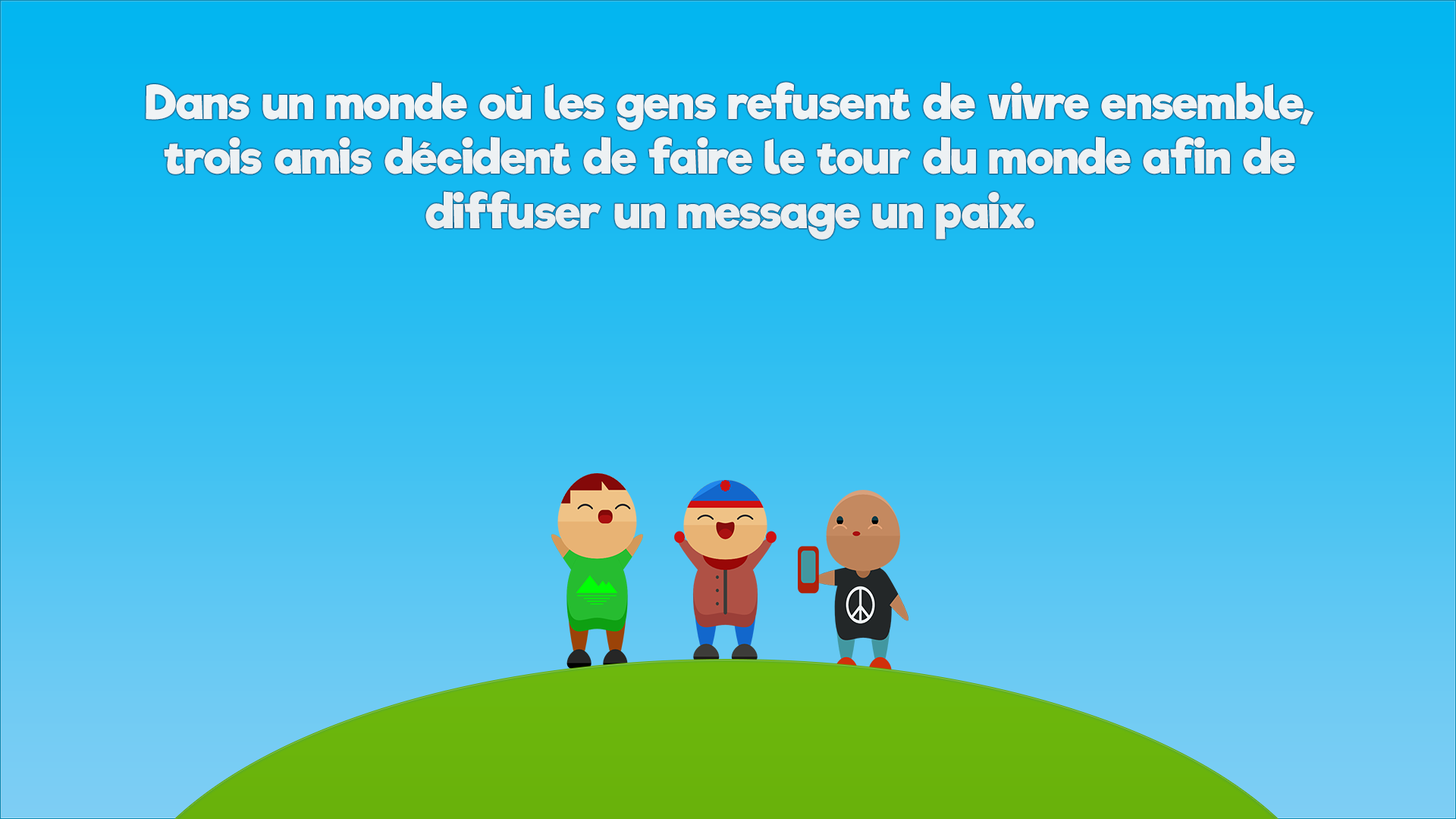
<style>
.page{position:relative;width:1456px;height:819px}
.page>*{position:absolute;margin:0}
.t1{font:45.5px "RifficFree-Bold";color:#edf1f3}
</style>
<div class="page">
<p class="t1" style="left:146px;top:82px;width:1168px;height:158px;text-align:center">Dans un monde où les gens refusent de vivre ensemble,<br>trois amis décident de faire le tour du monde afin de diffuser un message un paix.</p>
</div>
